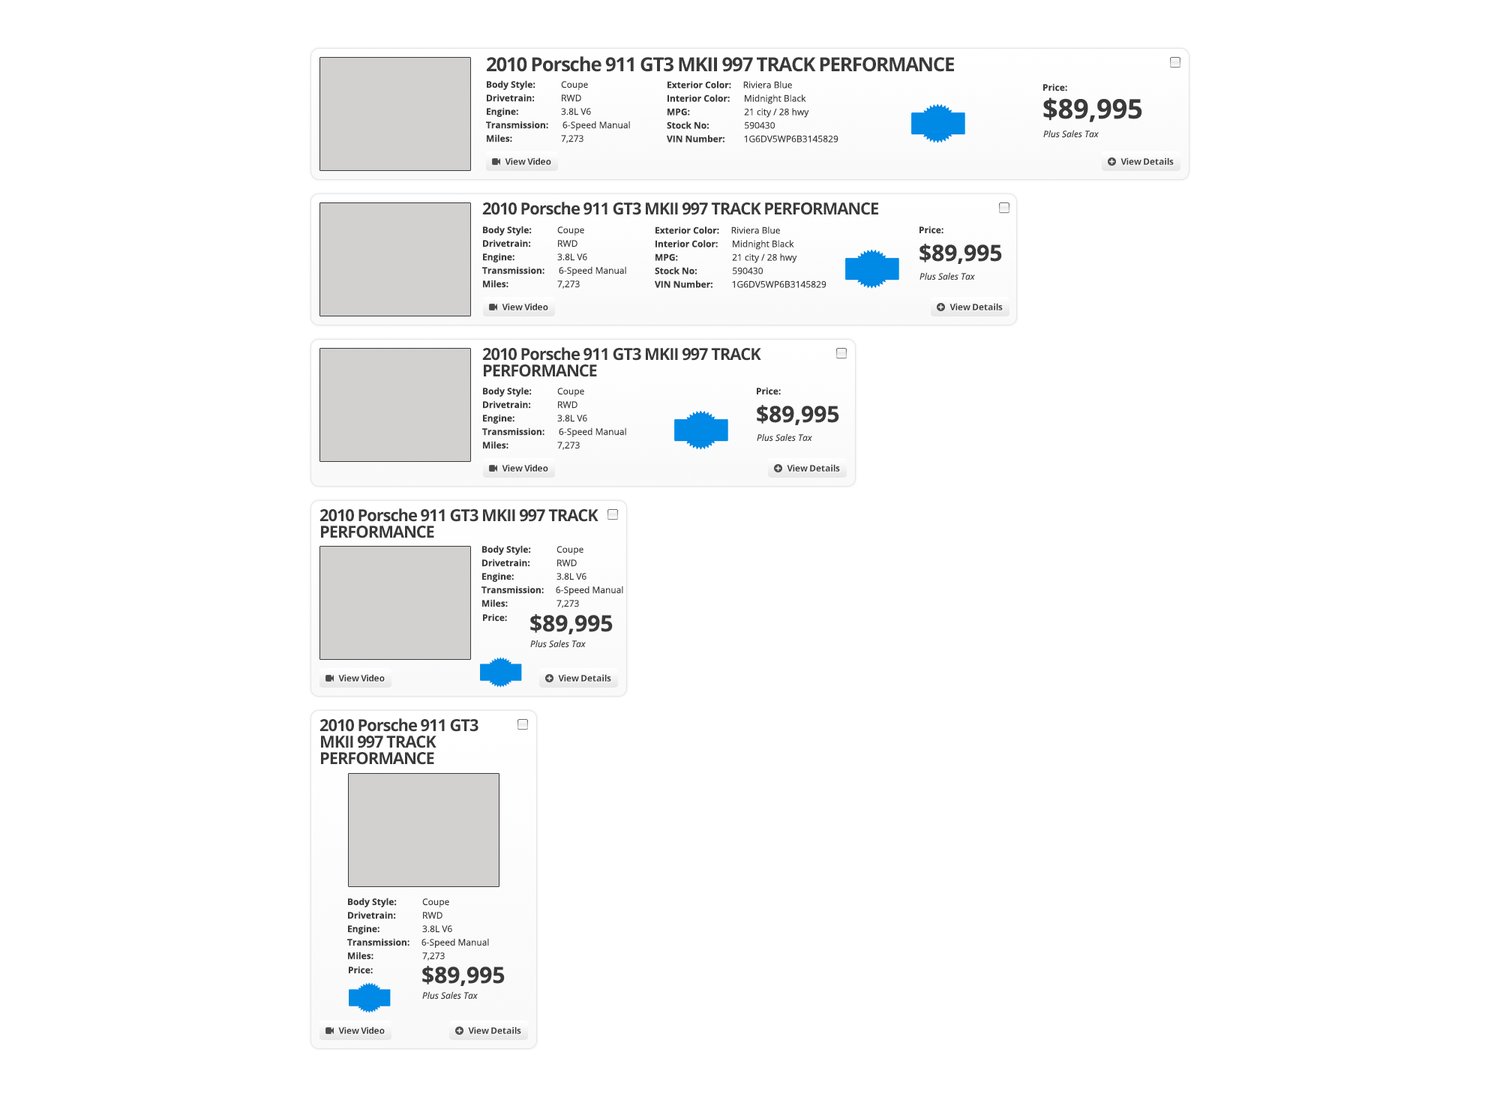
<style>
.page{position:relative;width:1500px;height:1103px;background:#ffffff}
.page>*{position:absolute;margin:0}
.t1{font:19.5px "OpenSans-Bold";letter-spacing:-0.05em;color:#3a3a3a}
.t2{font:9px/13.5px "OpenSans";color:#3a3a3a}
.t3{font:9px/13.5px "OpenSans-Bold";color:#3a3a3a}
.t4{font:9px "OpenSans-Bold";color:#3a3a3a}
.t5{font:27px "OpenSans-Bold";color:#3a3a3a}
.t6{font:9px "OpenSans-Italic";color:#3a3a3a}
.t7{font:9px "OpenSans-Bold";letter-spacing:-0.025em;color:#3a3a3a}
.t8{font:16.5px "OpenSans-Bold";letter-spacing:-0.05em;color:#3a3a3a}
.t9{font:22.5px "OpenSans-Bold";color:#3a3a3a}
.t10{font:16.5px/16.5px "OpenSans-Bold";letter-spacing:-0.05em;color:#3a3a3a}
</style>
<div class="page">
<p class="t1" style="left:487px;top:56px;width:467px;height:16px">2010 Porsche 911 GT3 MKII 997 TRACK PERFORMANCE</p>
<p class="t2" style="left:486px;top:80px;width:144px;height:63px"><span class="t3">Body Style:          </span>Coupe<br><span class="t3">Drivetrain:          </span>RWD<br><span class="t3">Engine:          </span>3.8L V6<br><span class="t3">Transmission:      </span>6-Speed Manual<br><span class="t3">Miles:           </span>7,273</p>
<p class="t2" style="left:667px;top:81px;width:171px;height:61px"><span class="t3">Exterior Color:     </span>Riviera Blue<br><span class="t3">Interior Color:      </span>Midnight Black<br><span class="t3">MPG:            </span>21 city / 28 hwy<br><span class="t3">Stock No:               </span>590430<br><span class="t3">VIN Number:        </span>1G6DV5WP6B3145829</p>
<p class="t4" style="left:1043px;top:83px;width:24px;height:8px">Price:</p>
<p class="t5" style="left:1043px;top:97px;width:99px;height:25px">$89,995</p>
<p class="t6" style="left:1043px;top:130px;width:56px;height:8px">Plus Sales Tax</p>
<p class="t7" style="left:505px;top:157px;width:46px;height:8px">View Video</p>
<p class="t7" style="left:1120px;top:157px;width:54px;height:8px">View Details</p>
<p class="t8" style="left:482px;top:202px;width:396px;height:13px">2010 Porsche 911 GT3 MKII 997 TRACK PERFORMANCE</p>
<p class="t2" style="left:482px;top:226px;width:144px;height:63px"><span class="t3">Body Style:          </span>Coupe<br><span class="t3">Drivetrain:          </span>RWD<br><span class="t3">Engine:          </span>3.8L V6<br><span class="t3">Transmission:      </span>6-Speed Manual<br><span class="t3">Miles:           </span>7,273</p>
<p class="t2" style="left:655px;top:226px;width:171px;height:62px"><span class="t3">Exterior Color:     </span>Riviera Blue<br><span class="t3">Interior Color:      </span>Midnight Black<br><span class="t3">MPG:            </span>21 city / 28 hwy<br><span class="t3">Stock No:               </span>590430<br><span class="t3">VIN Number:        </span>1G6DV5WP6B3145829</p>
<p class="t4" style="left:919px;top:226px;width:24px;height:8px">Price:</p>
<p class="t9" style="left:919px;top:244px;width:83px;height:20px">$89,995</p>
<p class="t6" style="left:919px;top:272px;width:56px;height:8px">Plus Sales Tax</p>
<p class="t7" style="left:502px;top:303px;width:46px;height:7px">View Video</p>
<p class="t7" style="left:949px;top:303px;width:54px;height:7px">View Details</p>
<p class="t10" style="left:482px;top:347px;width:279px;height:30px">2010 Porsche 911 GT3 MKII 997 TRACK <br>PERFORMANCE</p>
<p class="t2" style="left:482px;top:387px;width:144px;height:63px"><span class="t3">Body Style:          </span>Coupe<br><span class="t3">Drivetrain:          </span>RWD<br><span class="t3">Engine:          </span>3.8L V6<br><span class="t3">Transmission:      </span>6-Speed Manual<br><span class="t3">Miles:           </span>7,273</p>
<p class="t4" style="left:757px;top:387px;width:24px;height:8px">Price:</p>
<p class="t9" style="left:757px;top:405px;width:82px;height:20px">$89,995</p>
<p class="t6" style="left:757px;top:433px;width:55px;height:9px">Plus Sales Tax</p>
<p class="t7" style="left:502px;top:464px;width:46px;height:8px">View Video</p>
<p class="t7" style="left:787px;top:464px;width:53px;height:8px">View Details</p>
<p class="t10" style="left:319px;top:508px;width:279px;height:30px">2010 Porsche 911 GT3 MKII 997 TRACK <br>PERFORMANCE</p>
<p class="t2" style="left:481px;top:545px;width:142px;height:63px"><span class="t3">Body Style:          </span>Coupe<br><span class="t3">Drivetrain:          </span>RWD<br><span class="t3">Engine:          </span>3.8L V6<br><span class="t3">Transmission:     </span>6-Speed Manual<br><span class="t3">Miles:           </span>7,273</p>
<p class="t4" style="left:483px;top:613px;width:24px;height:9px">Price:</p>
<p class="t9" style="left:530px;top:614px;width:83px;height:20px">$89,995</p>
<p class="t6" style="left:530px;top:640px;width:56px;height:8px">Plus Sales Tax</p>
<p class="t7" style="left:338px;top:674px;width:47px;height:8px">View Video</p>
<p class="t7" style="left:558px;top:674px;width:53px;height:8px">View Details</p>
<p class="t10" style="left:319px;top:718px;width:159px;height:47px">2010 Porsche 911 GT3 <br>MKII 997 TRACK <br>PERFORMANCE</p>
<p class="t2" style="left:347px;top:898px;width:142px;height:63px"><span class="t3">Body Style:          </span>Coupe<br><span class="t3">Drivetrain:          </span>RWD<br><span class="t3">Engine:          </span>3.8L V6<br><span class="t3">Transmission:     </span>6-Speed Manual<br><span class="t3">Miles:           </span>7,273</p>
<p class="t4" style="left:349px;top:966px;width:24px;height:8px">Price:</p>
<p class="t9" style="left:422px;top:966px;width:83px;height:20px">$89,995</p>
<p class="t6" style="left:422px;top:991px;width:56px;height:9px">Plus Sales Tax</p>
<p class="t7" style="left:338px;top:1027px;width:47px;height:7px">View Video</p>
<p class="t7" style="left:468px;top:1027px;width:53px;height:7px">View Details</p>
</div>
